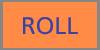
<style>
.page{position:relative;width:100px;height:50px;background:#ff8b46}
.page>*{position:absolute;margin:0}
.t1{font:24px "Aan55";color:#3943a4}
</style>
<div class="page">
<p class="t1" style="left:22px;top:16px;width:56px;height:19px">ROLL</p>
</div>
